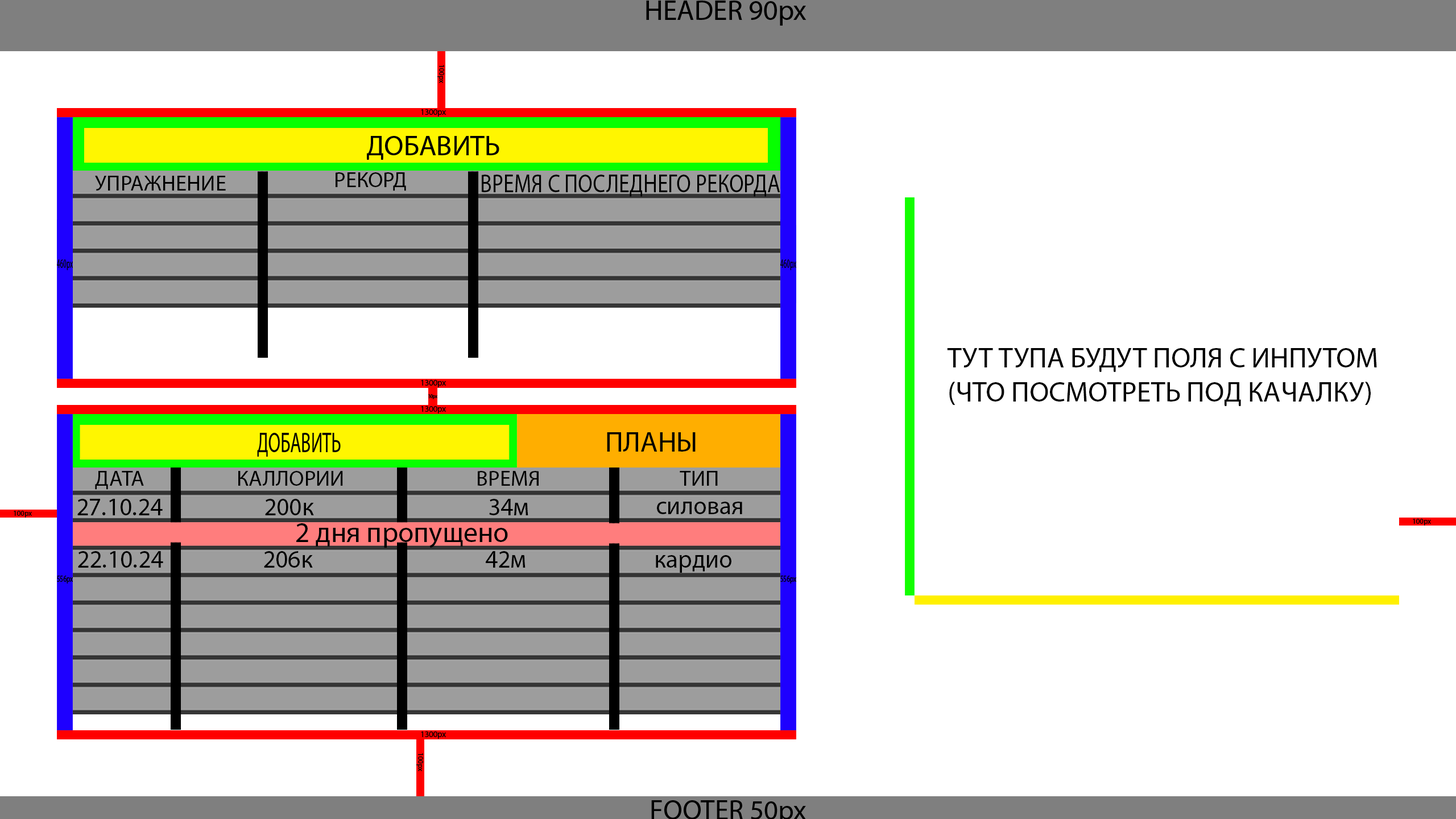
<style>
.page{position:relative;width:1456px;height:819px;background:#ffffff}
.page>*{position:absolute;margin:0}
.t1{font:21.9px "MyriadPro-Regular";color:#000000}
.t2{font:26.1px "MyriadPro-Regular";color:#000000;scale:0.82 1}
.t3{font:28.4px "MyriadPro-Regular";color:#000000}
.t4{font:24.9px "MyriadPro-Regular";color:#000000}
</style>
<div class="page">
<p class="t1" style="left:336px;top:172px;width:70px;height:19px">РЕКОРД</p>
<p class="t1" style="left:95px;top:176px;width:131px;height:15px">УПРАЖНЕНИЕ</p>
<p class="t2" style="left:482px;top:175px;width:298px;height:22px">ВРЕМЯ С ПОСЛЕДНЕГО РЕКОРДА</p>
<p class="t3" style="left:947px;top:348px;width:430px;height:58px">ТУТ ТУПА БУДУТ ПОЛЯ С ИНПУТОМ<br>(ЧТО ПОСМОТРЕТЬ ПОД КАЧАЛКУ)</p>
<p class="t3" style="left:607px;top:432px;width:89px;height:20px">ПЛАНЫ</p>
<p class="t1" style="left:95px;top:471px;width:49px;height:19px">ДАТА</p>
<p class="t1" style="left:238px;top:471px;width:105px;height:15px">КАЛЛОРИИ</p>
<p class="t1" style="left:478px;top:471px;width:61px;height:15px">ВРЕМЯ</p>
<p class="t1" style="left:680px;top:471px;width:38px;height:15px">ТИП</p>
<p class="t4" style="left:77px;top:499px;width:86px;height:16px">27.10.24</p>
<p class="t4" style="left:265px;top:499px;width:49px;height:16px">200к</p>
<p class="t4" style="left:489px;top:499px;width:39px;height:16px">34м</p>
<p class="t4" style="left:657px;top:502px;width:85px;height:12px">силовая</p>
<p class="t3" style="left:296px;top:523px;width:212px;height:25px">2 дня пропущено</p>
<p class="t4" style="left:78px;top:551px;width:85px;height:17px">22.10.24</p>
<p class="t4" style="left:264px;top:551px;width:49px;height:17px">206к</p>
<p class="t4" style="left:486px;top:551px;width:40px;height:17px">42м</p>
<p class="t4" style="left:656px;top:555px;width:75px;height:18px">кардио</p>
</div>
